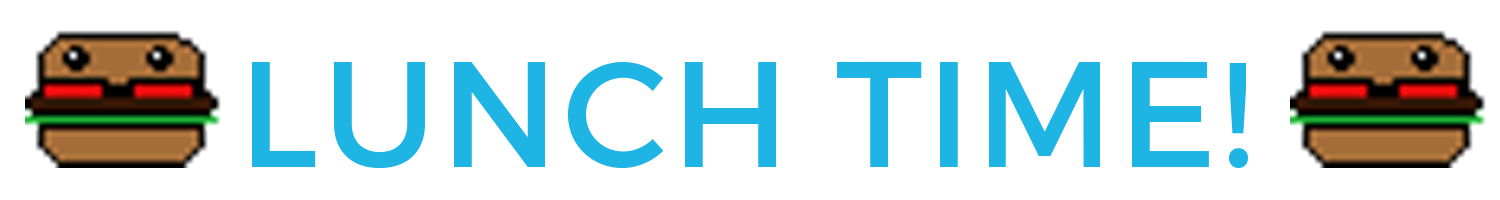
<style>
.page{position:relative;width:1500px;height:200px;background:#ffffff}
.page>*{position:absolute;margin:0}
.t1{font:150px "Montserrat-Regular";letter-spacing:0.025em;color:#1eb4e4;text-transform:uppercase}
</style>
<div class="page">
<p class="t1" style="left:252px;top:61px;width:996px;height:108px">LUNCH TIME!</p>
</div>
